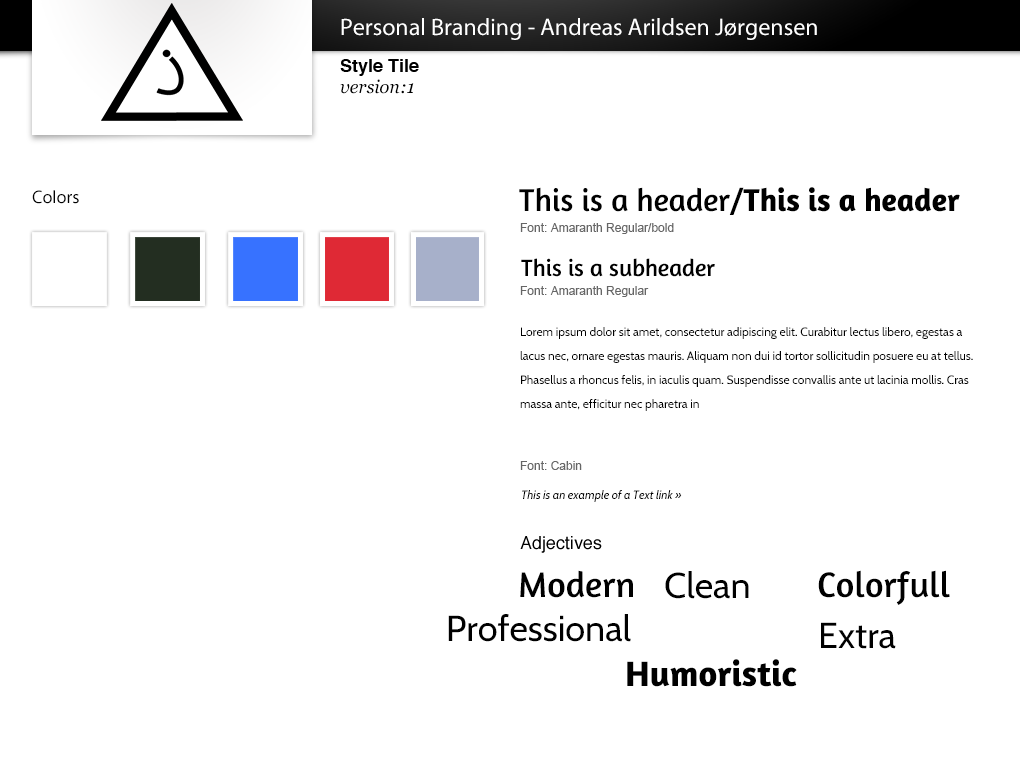
<style>
.page{position:relative;width:1020px;height:760px;background:#ffffff}
.page>*{position:absolute;margin:0}
.t1{font:24px "MyriadPro-Regular";color:#ffffff}
.t2{font:18px "Helvetica-Bold";color:#000000}
.t3{font:18px "Georgia-Italic";color:#000000}
.t4{font:18px "MyriadPro-Regular";color:#000000}
.t5{font:32px "Amaranth-Regular";color:#000000}
.t6{font:32px "Amaranth-Bold";color:#000000}
.t7{font:12px "ArialMT";color:#666666}
.t8{font:24px "Amaranth-Regular";color:#000000}
.t9{font:12px/24px "Cabin-Regular";color:#000000}
.t10{font:12px "Cabin-Italic";color:#000000}
.t11{font:18px "Helvetica";color:#000000}
.t12{font:36px "Amaranth-Regular";color:#000000}
.t13{font:36px "Cabin-Regular";color:#000000}
.t14{font:36px "Amaranth-Bold";color:#000000}
</style>
<div class="page">
<p class="t1" style="left:341px;top:18px;width:476px;height:22px">Personal Branding - Andreas Arildsen Jørgensen</p>
<p class="t2" style="left:340px;top:59px;width:79px;height:17px">Style Tile</p>
<p class="t3" style="left:340px;top:79px;width:74px;height:15px">version:1</p>
<p class="t4" style="left:32px;top:190px;width:47px;height:14px">Colors</p>
<p class="t5" style="left:519px;top:187px;width:441px;height:28px">This is a header/<span class="t6">This is a header</span></p>
<p class="t7" style="left:520px;top:223px;width:154px;height:11px">Font: Amaranth Regular/bold</p>
<p class="t8" style="left:521px;top:258px;width:194px;height:19px">This is a subheader</p>
<p class="t7" style="left:520px;top:286px;width:129px;height:11px">Font: Amaranth Regular</p>
<p class="t9" style="left:520px;top:327px;width:453px;height:84px">Lorem ipsum dolor sit amet, consectetur adipiscing elit. Curabitur lectus libero, egestas a lacus nec, ornare egestas mauris. Aliquam non dui id tortor sollicitudin posuere eu at tellus. Phasellus a rhoncus felis, in iaculis quam. Suspendisse convallis ante ut lacinia mollis. Cras massa ante, efficitur nec pharetra in</p>
<p class="t7" style="left:520px;top:461px;width:62px;height:9px">Font: Cabin</p>
<p class="t10" style="left:522px;top:490px;width:160px;height:12px">This is an example of a Text link »</p>
<p class="t11" style="left:520px;top:536px;width:82px;height:17px">Adjectives</p>
<p class="t12" style="left:520px;top:570px;width:113px;height:28px">Modern</p>
<p class="t13" style="left:665px;top:571px;width:84px;height:28px">Clean</p>
<p class="t12" style="left:818px;top:570px;width:132px;height:35px">Colorfull</p>
<p class="t13" style="left:448px;top:614px;width:183px;height:28px">Professional</p>
<p class="t13" style="left:821px;top:622px;width:75px;height:27px">Extra</p>
<p class="t14" style="left:627px;top:659px;width:170px;height:28px">Humoristic</p>
</div>
